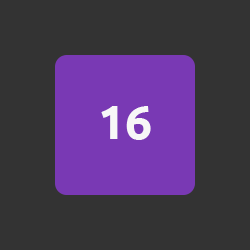
<style>
.page{position:relative;width:250px;height:250px;background:#333333}
.page>*{position:absolute;margin:0}
.t1{font:48px "Ubuntu-Bold";color:#f7f7f7}
</style>
<div class="page">
<p class="t1" style="left:101px;top:106px;width:50px;height:34px">16</p>
</div>
